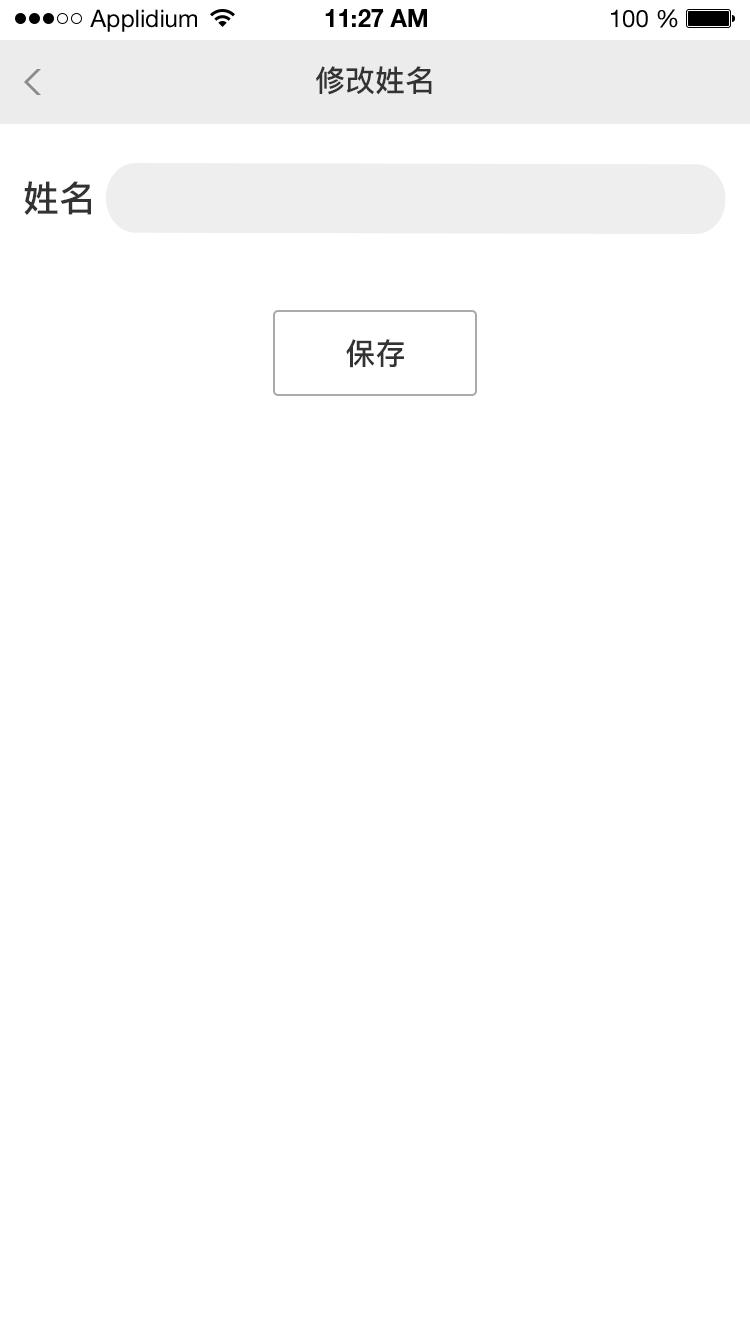
<style>
.page{position:relative;width:750px;height:1334px;background:#ffffff}
.page>*{position:absolute;margin:0}
.t1{font:24px "HelveticaNeueLTStd-Roman";color:#000000}
.t2{font:24px "HelveticaNeueLTStd-Bd";color:#000000}
.t3{font:30px "PingFang-SC-Bold";color:#333333}
.t4{font:36px "PingFang-SC-Bold";color:#333333}
</style>
<div class="page">
<p class="t1" style="left:90px;top:9px;width:107px;height:23px">Applidium</p>
<p class="t2" style="left:325px;top:9px;width:102px;height:18px">11:27 AM</p>
<p class="t1" style="left:611px;top:9px;width:67px;height:19px">100 %</p>
<p class="t3" style="left:316px;top:66px;width:116px;height:29px">修改姓名</p>
<p class="t4" style="left:24px;top:181px;width:67px;height:34px">姓名</p>
<p class="t3" style="left:346px;top:339px;width:58px;height:29px">保存</p>
</div>
